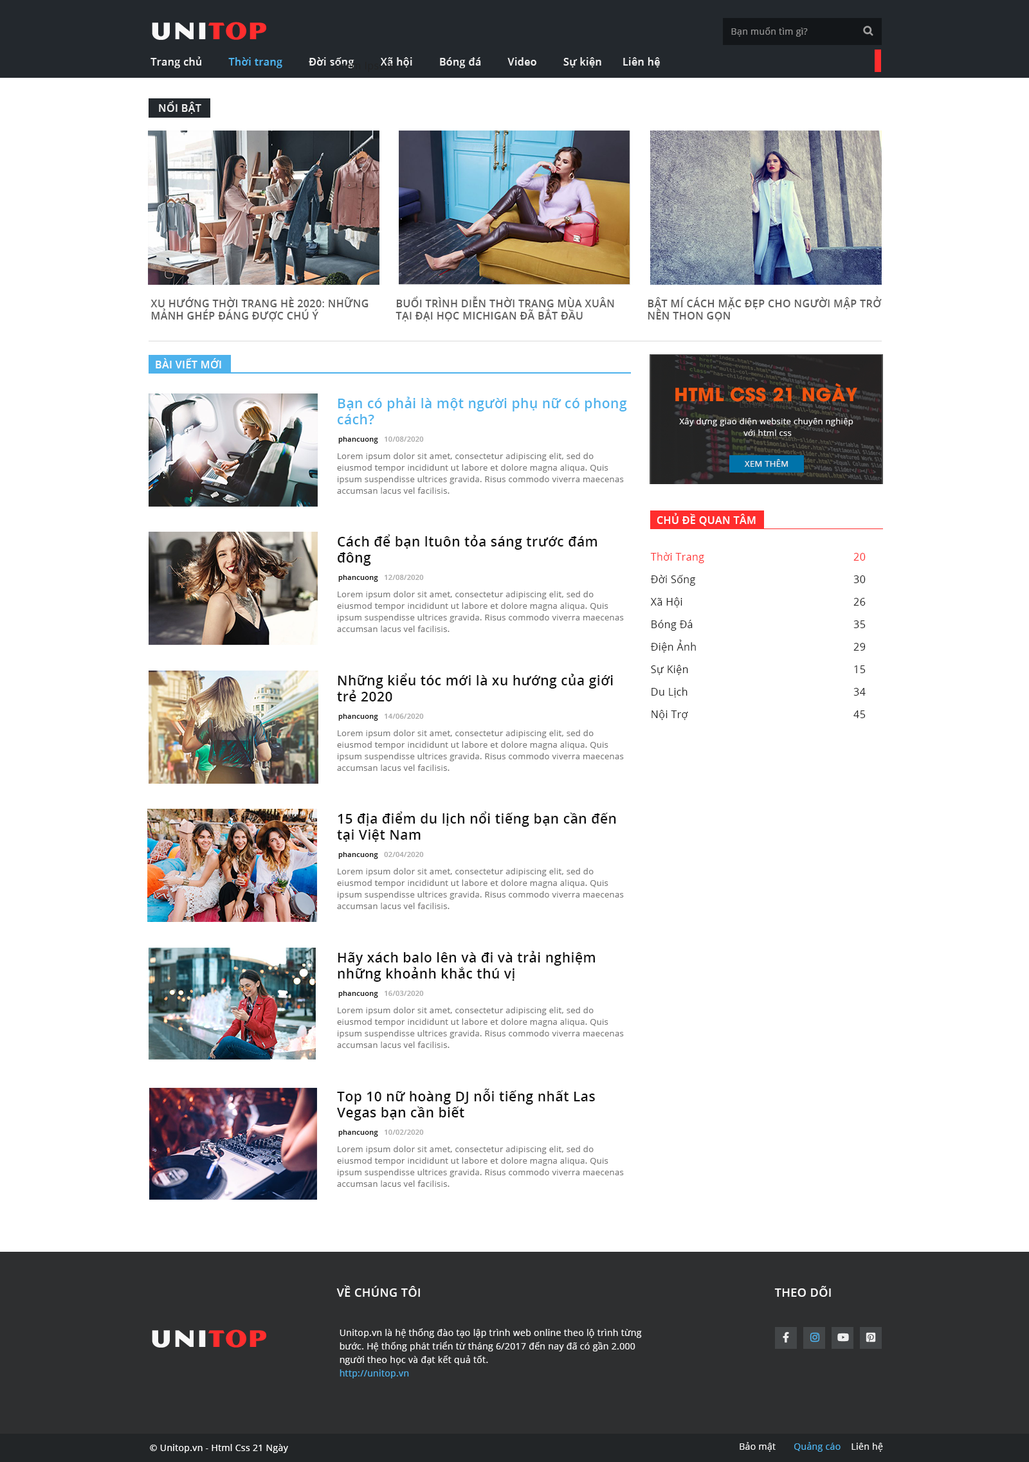
<style>
.page{position:relative;width:1029px;height:1462px;background:#ffffff}
.page>*{position:absolute;margin:0}
.t1{font:9px "OpenSans-Regular";letter-spacing:0.025em;color:#909090}
.t2{font:10.3px "OpenSans-SemiBold";letter-spacing:0.025em;color:#eeeeee}
.t3{font:10.3px "OpenSans-SemiBold";letter-spacing:0.025em;color:#4db2ec}
.t4{font:10.3px "OpenSans-SemiBold";letter-spacing:0.025em;color:#5f5f5f;text-transform:uppercase}
.t5{font:10.3px "OpenSans-SemiBold";letter-spacing:0.025em;color:#fcfcfc;text-transform:uppercase}
.t6{font:18px "UTMAvoBold";letter-spacing:0.025em;color:#f05510}
.t7{font:13.5px "OpenSans-SemiBold";letter-spacing:0.025em;color:#4db2ec}
.t8{font:8.4px "OpenSans-Regular";letter-spacing:0.025em;color:#363636}
.t9{font:8.4px/11.6px "OpenSans-Regular";letter-spacing:0.025em;color:#f0f0f0}
.t10{font:7.1px "OpenSans-SemiBold";letter-spacing:0.025em;color:#aaaaaa}
.t11{font:7.1px "OpenSans-SemiBold";letter-spacing:0.025em;color:#111111}
.t12{font:8.4px/11.6px "OpenSans-Regular";letter-spacing:0.025em;color:#777777}
.t13{font:8.4px "OpenSans-Regular";letter-spacing:0.025em;color:#f0f0f0}
.t14{font:13.5px "OpenSans-SemiBold";letter-spacing:0.025em;color:#111111}
.t15{font:10.3px/22.5px "OpenSans-Regular";letter-spacing:0.025em;color:#212121}
.t16{font:10.3px/22.5px "OpenSans-Regular";letter-spacing:0.025em;color:#ff2d2d}
.t17{font:11.6px "OpenSans-SemiBold";letter-spacing:0.025em;color:#f6f6f6}
.t18{font:9px/13.5px "OpenSans-Regular";letter-spacing:0.025em;color:#f6f6f6}
.t19{font:9px/13.5px "OpenSans-Regular";letter-spacing:0.025em;color:#4db2ec}
.t20{font:9px "OpenSans-Regular";letter-spacing:0.025em;color:#ffffff}
.t21{font:9px "OpenSans-Regular";letter-spacing:0.025em;color:#4db2ec}
.t22{font:9px "OpenSans-Regular";letter-spacing:0.025em;color:#f3f3f3}
</style>
<div class="page">
<p class="t1" style="left:731px;top:27px;width:76px;height:10px">Bạn muốn tìm gì?</p>
<p class="t2" style="left:150px;top:57px;width:510px;height:11px">Trang chủ         <span class="t3">Thời trang </span>        Đời sống         Xã hội         Bóng đá         Video         Sự kiện       Liên hệ</p>
<p class="t2" style="left:159px;top:101px;width:42px;height:13px">NỔI BẬT</p>
<p class="t4" style="left:150px;top:297px;width:218px;height:24px">Xu hướng thời trang hè 2020: Những mảnh ghép đáng được chú ý</p>
<p class="t4" style="left:395px;top:296px;width:219px;height:25px">Buổi trình diễn thời trang mùa xuân tại Đại học Michigan đã bắt đầu</p>
<p class="t4" style="left:647px;top:296px;width:234px;height:25px">Bật mí cách mặc đẹp cho người mập trở nên thon gọn</p>
<p class="t5" style="left:156px;top:358px;width:65px;height:10px">Bài viết mới</p>
<p class="t6" style="left:675px;top:383px;width:182px;height:19px">HTML CSS 21 NGÀY</p>
<p class="t7" style="left:338px;top:397px;width:289px;height:27px">Bạn có phải là một người phụ nữ có phong cách?</p>
<p class="t8" style="left:739px;top:402px;width:54px;height:8px">Lorem Ipsum</p>
<p class="t9" style="left:679px;top:418px;width:174px;height:18px;text-align:center">Xây dựng giao diện website chuyên nghiệp <br>với html css</p>
<p class="t10" style="left:338px;top:437px;width:86px;height:7px"><span class="t11">phancuong   </span>10/08/2020</p>
<p class="t12" style="left:337px;top:453px;width:287px;height:41px">Lorem ipsum dolor sit amet, consectetur adipiscing elit, sed do eiusmod tempor incididunt ut labore et dolore magna aliqua. Quis ipsum suspendisse ultrices gravida. Risus commodo viverra maecenas accumsan lacus vel facilisis.</p>
<p class="t13" style="left:744px;top:459px;width:44px;height:8px">XEM THÊM</p>
<p class="t5" style="left:656px;top:513px;width:99px;height:13px">CHỦ ĐỀ QUAN TÂM</p>
<p class="t14" style="left:338px;top:534px;width:259px;height:32px">Cách để bạn ltuôn tỏa sáng trước đám đông</p>
<p class="t15" style="left:650px;top:552px;width:54px;height:168px"><span class="t16">Thời Trang<br></span>Đời Sống<br>Xã Hội<br>Bóng Đá<br>Điện Ảnh<br>Sự Kiện<br>Du Lịch<br>Nội Trợ</p>
<p class="t15" style="left:853px;top:553px;width:12px;height:165px;text-align:right"><span class="t16">20<br></span>30<br>26<br>35<br>29<br>15<br>34<br>45</p>
<p class="t10" style="left:338px;top:575px;width:86px;height:7px"><span class="t11">phancuong   </span>12/08/2020</p>
<p class="t12" style="left:337px;top:591px;width:287px;height:41px">Lorem ipsum dolor sit amet, consectetur adipiscing elit, sed do eiusmod tempor incididunt ut labore et dolore magna aliqua. Quis ipsum suspendisse ultrices gravida. Risus commodo viverra maecenas accumsan lacus vel facilisis.</p>
<p class="t14" style="left:337px;top:673px;width:276px;height:28px">Những kiểu tóc mới là xu hướng của giới trẻ 2020</p>
<p class="t10" style="left:338px;top:714px;width:86px;height:7px"><span class="t11">phancuong   </span>14/06/2020</p>
<p class="t12" style="left:337px;top:730px;width:287px;height:41px">Lorem ipsum dolor sit amet, consectetur adipiscing elit, sed do eiusmod tempor incididunt ut labore et dolore magna aliqua. Quis ipsum suspendisse ultrices gravida. Risus commodo viverra maecenas accumsan lacus vel facilisis.</p>
<p class="t14" style="left:337px;top:811px;width:279px;height:31px">15 địa điểm du lịch nổi tiếng bạn cần đến tại Việt Nam</p>
<p class="t10" style="left:338px;top:852px;width:86px;height:7px"><span class="t11">phancuong   </span>02/04/2020</p>
<p class="t12" style="left:337px;top:868px;width:287px;height:41px">Lorem ipsum dolor sit amet, consectetur adipiscing elit, sed do eiusmod tempor incididunt ut labore et dolore magna aliqua. Quis ipsum suspendisse ultrices gravida. Risus commodo viverra maecenas accumsan lacus vel facilisis.</p>
<p class="t14" style="left:338px;top:951px;width:257px;height:31px">Hãy xách balo lên và đi và trải nghiệm những khoảnh khắc thú vị</p>
<p class="t10" style="left:338px;top:991px;width:86px;height:7px"><span class="t11">phancuong   </span>16/03/2020</p>
<p class="t12" style="left:337px;top:1007px;width:287px;height:41px">Lorem ipsum dolor sit amet, consectetur adipiscing elit, sed do eiusmod tempor incididunt ut labore et dolore magna aliqua. Quis ipsum suspendisse ultrices gravida. Risus commodo viverra maecenas accumsan lacus vel facilisis.</p>
<p class="t14" style="left:337px;top:1088px;width:258px;height:32px">Top 10 nữ hoàng DJ nỗi tiếng nhất Las Vegas bạn cần biết</p>
<p class="t10" style="left:338px;top:1130px;width:86px;height:7px"><span class="t11">phancuong   </span>10/02/2020</p>
<p class="t12" style="left:337px;top:1146px;width:287px;height:41px">Lorem ipsum dolor sit amet, consectetur adipiscing elit, sed do eiusmod tempor incididunt ut labore et dolore magna aliqua. Quis ipsum suspendisse ultrices gravida. Risus commodo viverra maecenas accumsan lacus vel facilisis.</p>
<p class="t17" style="left:336px;top:1285px;width:84px;height:12px">VỀ CHÚNG TÔI</p>
<p class="t17" style="left:774px;top:1286px;width:57px;height:11px">THEO DÕI</p>
<p class="t18" style="left:339px;top:1328px;width:303px;height:50px">Unitop.vn là hệ thống đào tạo lập trình web online theo lộ trình từng bước. Hệ thống phát triển từ tháng 6/2017 đến nay đã có gần 2.000 người theo học và đạt kết quả tốt.<br><span class="t19">http://unitop.vn</span></p>
<p class="t20" style="left:150px;top:1444px;width:138px;height:9px">© Unitop.vn - Html Css 21 Ngày</p>
<p class="t21" style="left:739px;top:1442px;width:144px;height:10px"><span class="t22">   Bảo mật       </span>Quảng cáo<span class="t22">    Liên hệ</span></p>
</div>
